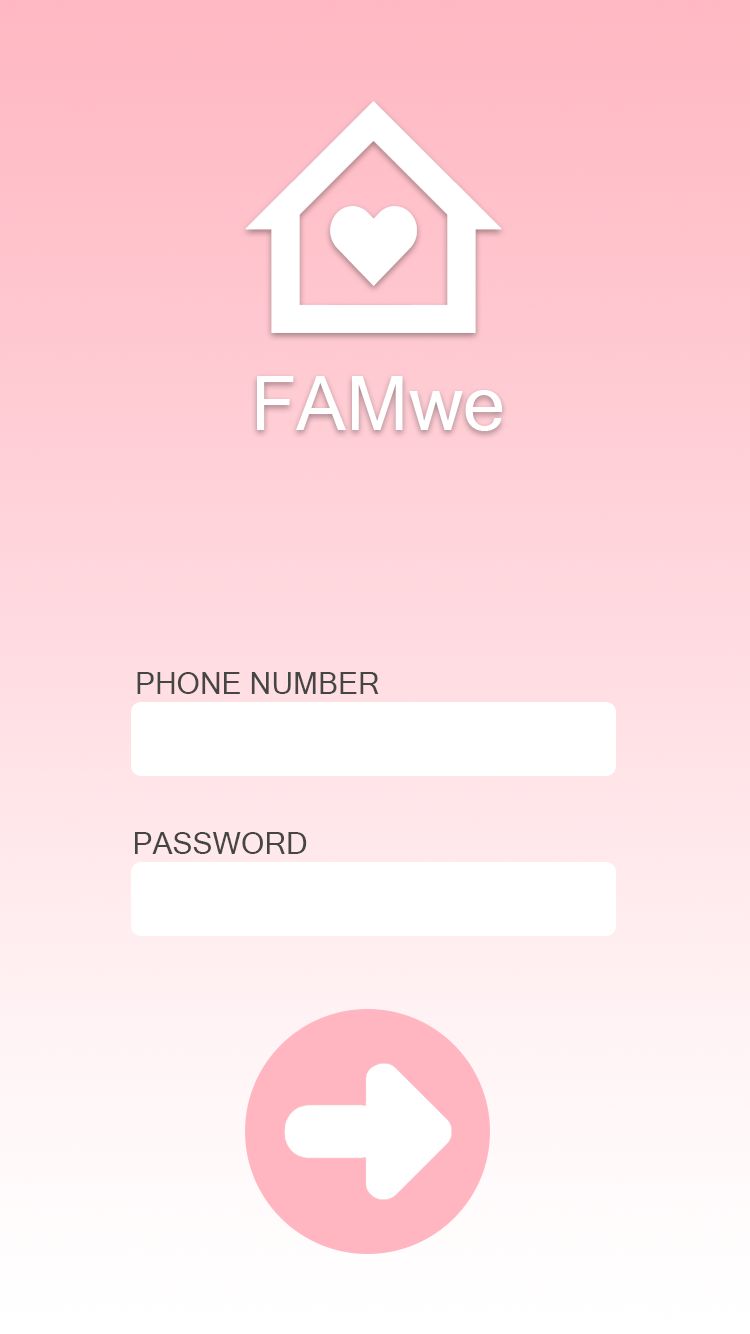
<style>
.page{position:relative;width:750px;height:1334px}
.page>*{position:absolute;margin:0}
.t1{font:75px "MicrosoftSansSerif";color:#ffffff}
.t2{font:30px "MicrosoftSansSerif";color:#454545}
</style>
<div class="page">
<p class="t1" style="left:257px;top:376px;width:246px;height:55px">FAMwe</p>
<p class="t2" style="left:137px;top:672px;width:242px;height:22px">PHONE NUMBER</p>
<p class="t2" style="left:135px;top:832px;width:172px;height:22px">PASSWORD</p>
</div>
